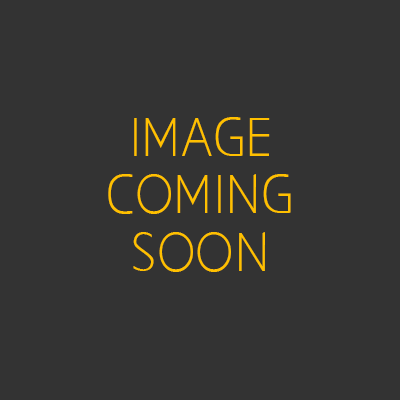
<style>
.page{position:relative;width:400px;height:400px;background:#333333}
.page>*{position:absolute;margin:0}
.t1{font:48px "AaarghNormal";color:#ffc000}
</style>
<div class="page">
<p class="t1" style="left:108px;top:117px;width:183px;height:155px;text-align:center">IMAGE<br>COMING<br>SOON</p>
</div>
